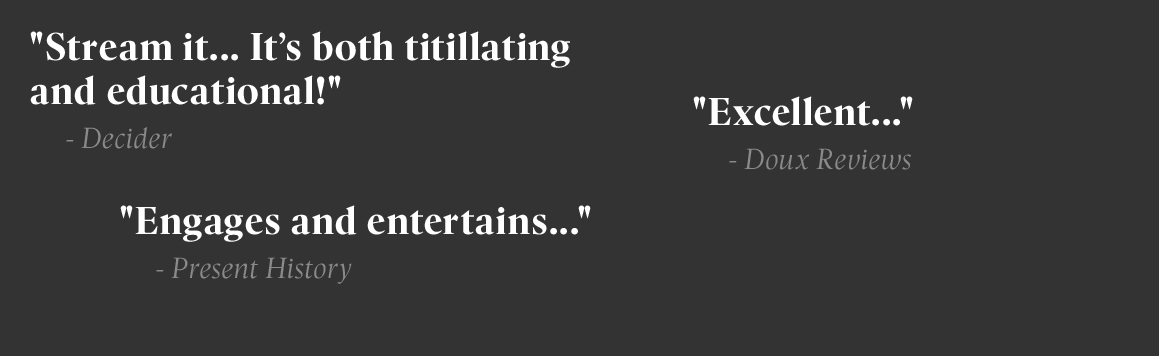
<style>
.page{position:relative;width:1159px;height:356px;background:#333333}
.page>*{position:absolute;margin:0}
.t1{font:40px/44px "Nicholas-Bold";letter-spacing:0.05em;color:#ffffff}
.t2{font:30px/44px "Nicholas-Italic";letter-spacing:0.05em;color:#8c8a89}
</style>
<div class="page">
<p class="t1" style="left:30px;top:31px;width:540px;height:118px">"Stream it... It’s both titillating and educational!"<br><span class="t2"> - Decider</span></p>
<p class="t1" style="left:693px;top:96px;width:220px;height:74px">"Excellent..."<br><span class="t2"> - Doux Reviews</span></p>
<p class="t1" style="left:120px;top:205px;width:471px;height:79px">"Engages and entertains..."<br><span class="t2"> - Present History</span></p>
</div>
